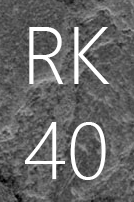
<style>
.page{position:relative;width:134px;height:202px}
.page>*{position:absolute;margin:0}
.t1{font:82px/94.5px "SegoeUI-Light";color:#ffffff}
</style>
<div class="page">
<p class="t1" style="left:25px;top:27px;width:85px;height:153px;text-align:center">RK<br>40</p>
</div>
